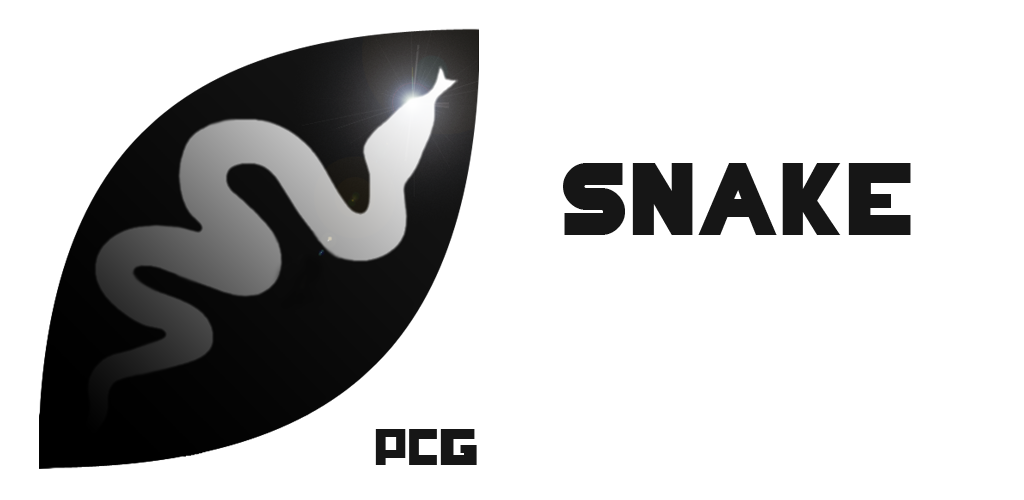
<style>
.page{position:relative;width:1024px;height:500px;background:#ffffff}
.page>*{position:absolute;margin:0}
.t1{font:96.1px "HungerGames";color:#161616}
.t2{font:48px "HungerGames";color:#161616}
</style>
<div class="page">
<p class="t1" style="left:563px;top:163px;width:348px;height:72px">SNAKE</p>
<p class="t2" style="left:375px;top:429px;width:102px;height:36px">PCG</p>
</div>
